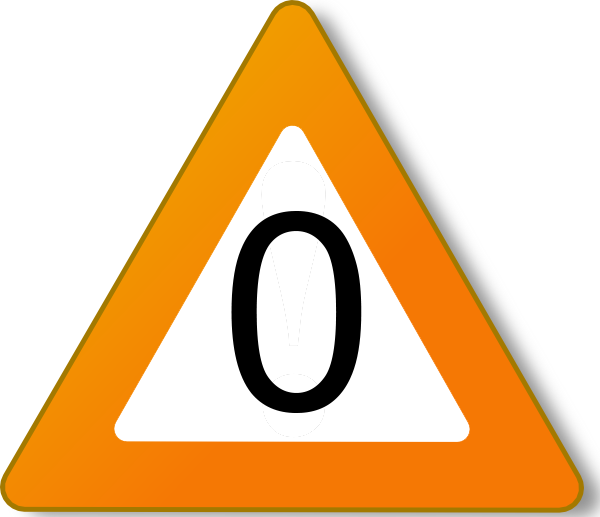
<style>
.page{position:relative;width:600px;height:517px;background:#ffffff}
.page>*{position:absolute;margin:0}
.t1{font:277.6px "ArialMT";color:#000000}
</style>
<div class="page">
<p class="t1" style="left:231px;top:211px;width:131px;height:202px">0</p>
</div>
